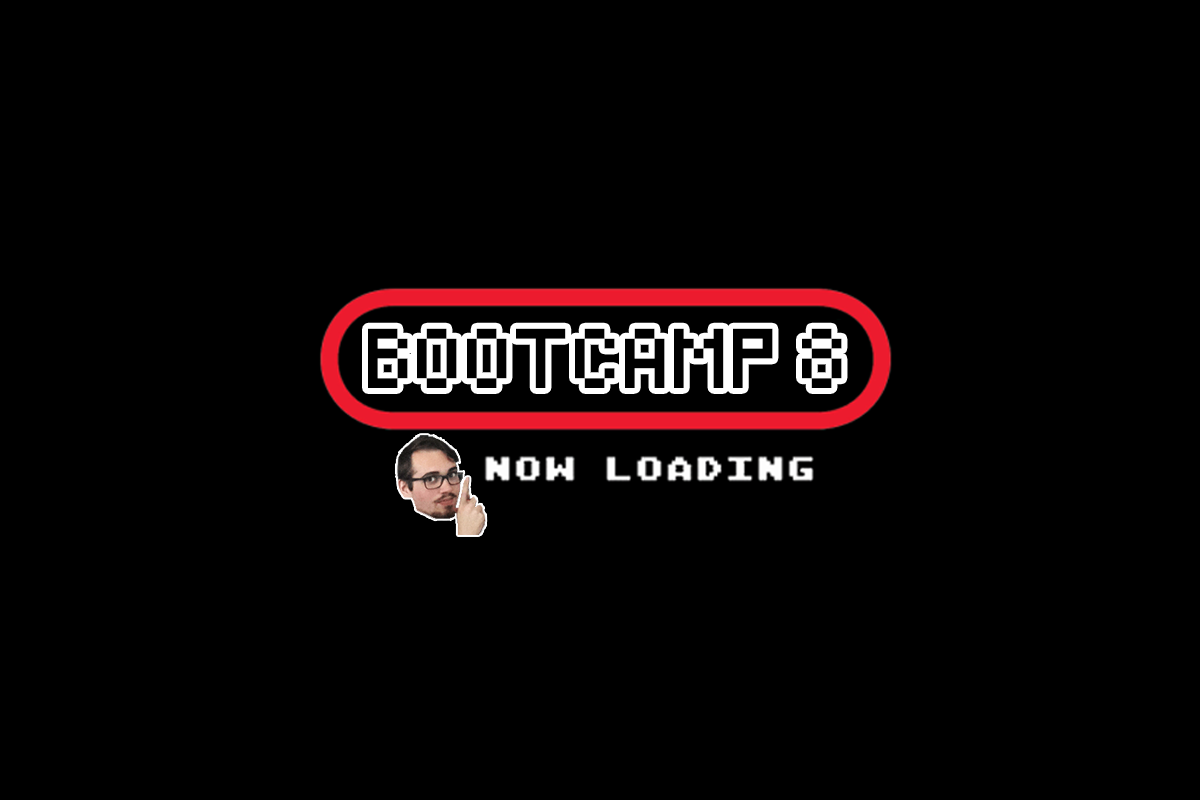
<style>
.page{position:relative;width:1200px;height:800px;background:#000000}
.page>*{position:absolute;margin:0}
.t1{font:49.4px "Pixeled";color:#000000}
</style>
<div class="page">
<p class="t1" style="left:368px;top:328px;width:474px;height:60px">BOOTCAMP 8</p>
</div>
